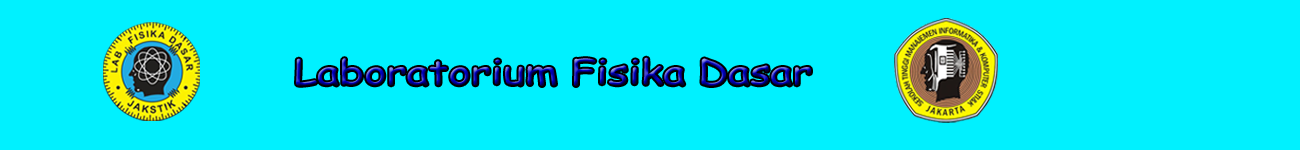
<style>
.page{position:relative;width:1300px;height:150px;background:#00f1ff}
.page>*{position:absolute;margin:0}
.t1{font:33.7px "ComicSansMS";scale:1.26 1}
</style>
<div class="page">
<p class="t1" style="left:296px;top:57px;width:515px;height:29px">Laboratorium Fisika Dasar</p>
</div>
